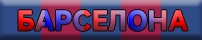
<style>
.page{position:relative;width:202px;height:40px}
.page>*{position:absolute;margin:0}
.t1{font:25px "MiSans-Heavy"}
</style>
<div class="page">
<p class="t1" style="left:18px;top:10px;width:170px;height:21px">БАРСЕЛОНА</p>
</div>
